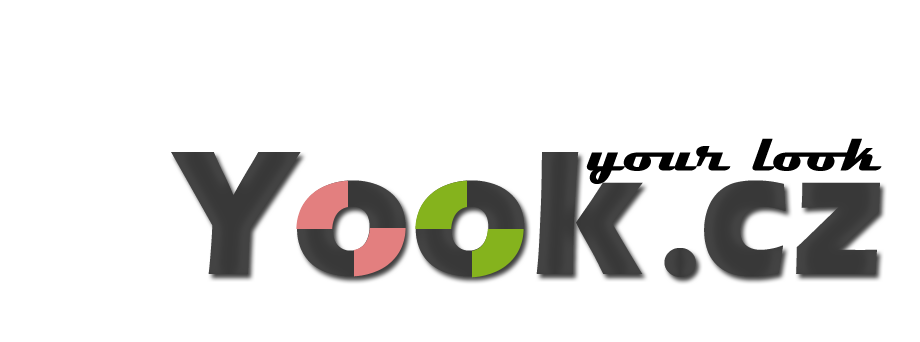
<style>
.page{position:relative;width:920px;height:342px;background:#ffffff}
.page>*{position:absolute;margin:0}
.t1{font:54px "Magneto-Bold";color:#000000;scale:1.08 1}
.t2{font:182.9px "ErasITC-Bold";color:#000000}
.t3{font:182.9px "Magneto-Bold";color:#000000}
</style>
<div class="page">
<p class="t1" style="left:586px;top:138px;width:296px;height:46px">your look</p>
<p class="t2" style="left:171px;top:152px;width:709px;height:125px">Yook<span class="t3">.</span>cz</p>
</div>
